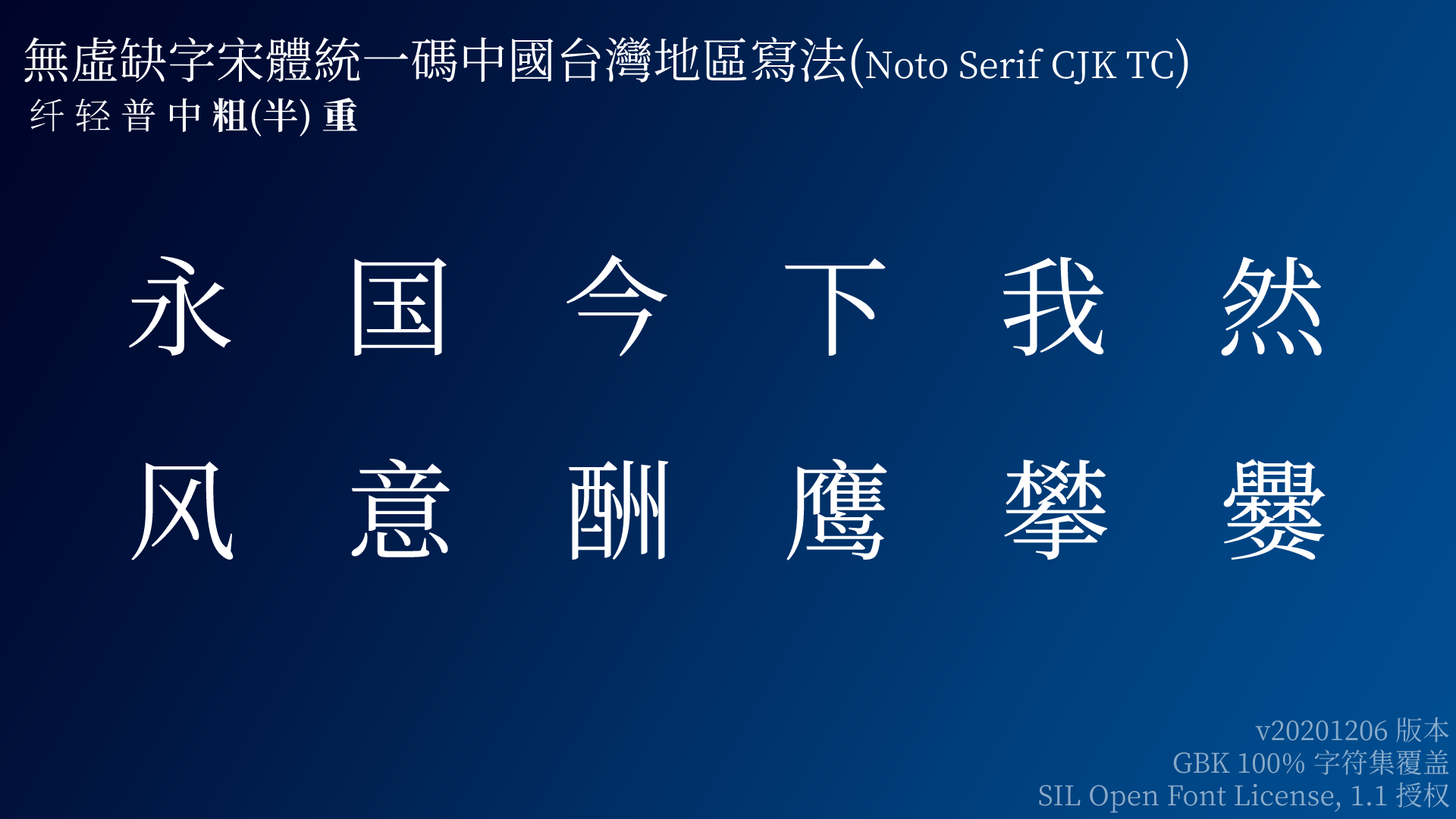
<style>
.page{position:relative;width:1456px;height:819px}
.page>*{position:absolute;margin:0}
.t1{font:48.5px "NotoSerifCJKtc-Regular";color:#ffffff}
.t2{font:36.4px "NotoSerifCJKtc-Regular";color:#ffffff}
.t3{font:36.4px "NotoSerifCJKtc-SemiBold";color:#ffffff}
.t4{font:36.4px "NotoSerifCJKtc-ExtraLight";color:#ffffff}
.t5{font:36.4px "NotoSerifCJKtc-Light";color:#ffffff}
.t6{font:36.4px "NotoSerifCJKtc-Medium";color:#ffffff}
.t7{font:36.4px "NotoSerifCJKtc-Bold";color:#ffffff}
.t8{font:36.4px "NotoSerifCJKtc-Black";color:#ffffff}
.t9{font:109.2px "NotoSerifCJKtc-Regular";color:#ffffff}
.t10{font:27.3px "NotoSerifCJKtc-Regular";color:#8aabca}
</style>
<div class="page">
<p class="t1" style="left:24px;top:36px;width:1164px;height:53px">無虛缺字宋體統一碼中國台灣地區寫法(<span class="t2">Noto Serif CJK TC</span>)</p>
<p class="t3" style="left:30px;top:97px;width:328px;height:39px"><span class="t4">纤 </span><span class="t5">轻 </span><span class="t2">普 </span><span class="t6">中 </span><span class="t7">粗</span>(半) <span class="t8">重</span></p>
<p class="t9" style="left:128px;top:255px;width:1201px;height:106px">永　国　今　下　我　然</p>
<p class="t9" style="left:131px;top:458px;width:1195px;height:105px">风　意　酬　鹰　攀　爨</p>
<p class="t10" style="left:1039px;top:717px;width:411px;height:96px;text-align:right">v20201206 版本<br>GBK 100% 字符集覆盖<br>SIL Open Font License, 1.1 授权</p>
</div>
